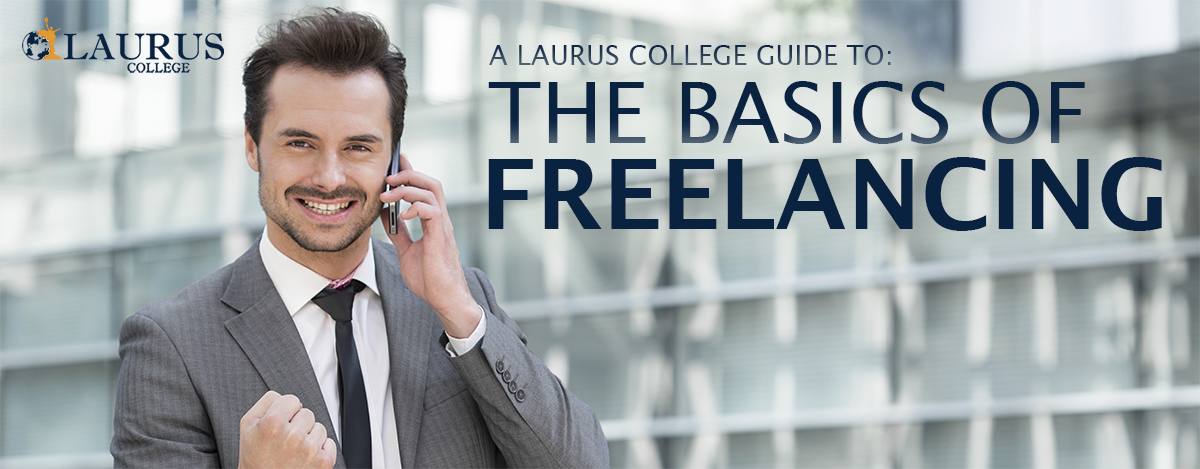
<style>
.page{position:relative;width:1200px;height:469px}
.page>*{position:absolute;margin:0}
.t1{font:27.3px "LucidaSans";text-transform:uppercase}
.t2{font:83.7px "LucidaSans";color:#092240;text-transform:uppercase}
.t3{font:97px "LucidaSans-Demi";color:#092240;text-transform:uppercase}
</style>
<div class="page">
<p class="t1" style="left:489px;top:45px;width:402px;height:20px">A Laurus College Guide To:</p>
<p class="t2" style="left:488px;top:81px;width:597px;height:63px">THE BASICS OF</p>
<p class="t3" style="left:488px;top:157px;width:674px;height:74px">FREELANCING</p>
</div>
